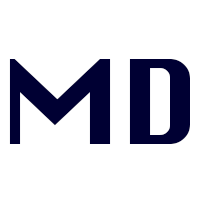
<style>
.page{position:relative;width:200px;height:200px;background:#ffffff}
.page>*{position:absolute;margin:0}
.t1{font:113.4px "Silom";color:#000033;scale:1.06 1}
</style>
<div class="page">
<p class="t1" style="left:9px;top:59px;width:181px;height:85px">MD</p>
</div>
